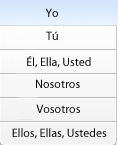
<style>
.page{position:relative;width:118px;height:145px}
.page>*{position:absolute;margin:0}
.t1{font:12px "MyriadPro-Regular"}
.t2{font:12px "MyriadPro-Regular";color:#000000}
</style>
<div class="page">
<p class="t1" style="left:45px;top:8px;width:13px;height:9px">Yo</p>
<p class="t2" style="left:46px;top:31px;width:12px;height:9px">Tú</p>
<p class="t2" style="left:27px;top:56px;width:64px;height:12px">Él, Ella, Usted</p>
<p class="t2" style="left:36px;top:79px;width:44px;height:9px">Nosotros</p>
<p class="t1" style="left:36px;top:104px;width:44px;height:9px">Vosotros</p>
<p class="t2" style="left:12px;top:128px;width:95px;height:11px">Ellos, Ellas, Ustedes</p>
</div>
